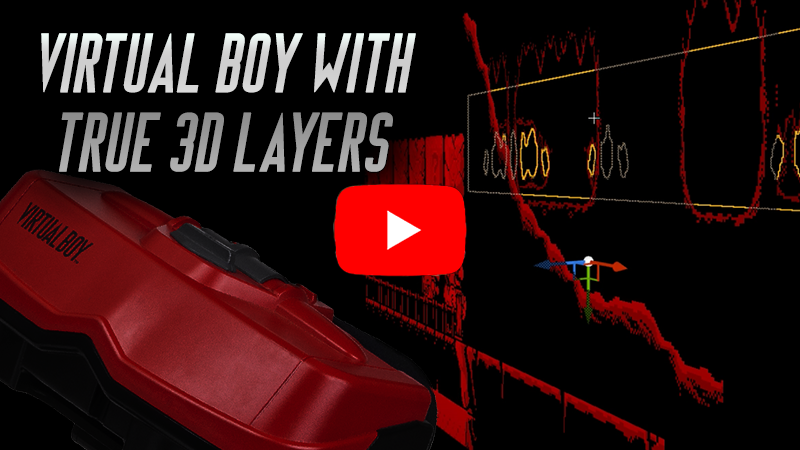
<style>
.page{position:relative;width:800px;height:450px;background:#000000}
.page>*{position:absolute;margin:0}
.t1{font:66.2px "VirtualLogo";letter-spacing:0.02em;font-weight:bold;font-style:italic}
</style>
<div class="page">
<p class="t1" style="left:41px;top:33px;width:375px;height:139px;text-align:center">Virtual Boy with<br>true 3D layers</p>
</div>
